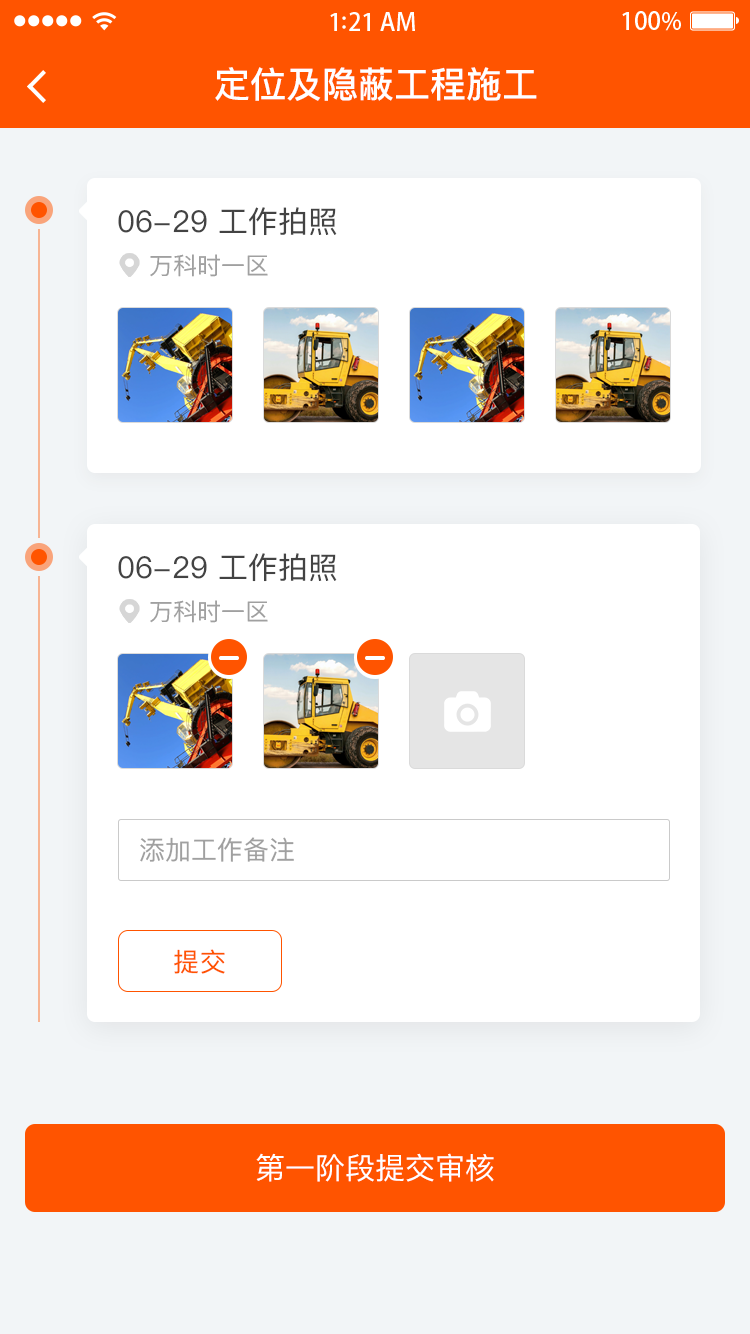
<style>
.page{position:relative;width:750px;height:1334px;background:#ffffff}
.page>*{position:absolute;margin:0}
.t1{font:36px "PingFangSC-Medium";color:#ffffff}
.t2{font:30px "PingFangSC-Regular";color:#434343}
.t3{font:24px "PingFangSC-Regular";color:#a0a0a0}
.t4{font:26px "PingFangSC-Regular";color:#a0a0a0}
.t5{font:26px "PingFangSC-Regular";letter-spacing:0.02em;color:#ff5400}
.t6{font:30px "PingFangSC-Regular";color:#ffffff;text-transform:uppercase}
</style>
<div class="page">
<p class="t1" style="left:215px;top:67px;width:322px;height:34px">定位及隐蔽工程施工</p>
<p class="t2" style="left:118px;top:207px;width:219px;height:29px">06-29 工作拍照</p>
<p class="t3" style="left:150px;top:254px;width:118px;height:23px">万科时一区</p>
<p class="t2" style="left:118px;top:553px;width:219px;height:29px">06-29 工作拍照</p>
<p class="t3" style="left:150px;top:600px;width:118px;height:23px">万科时一区</p>
<p class="t4" style="left:140px;top:837px;width:154px;height:25px">添加工作备注</p>
<p class="t5" style="left:174px;top:949px;width:51px;height:25px">提交</p>
<p class="t6" style="left:256px;top:1153px;width:238px;height:29px">第一阶段提交审核</p>
</div>
